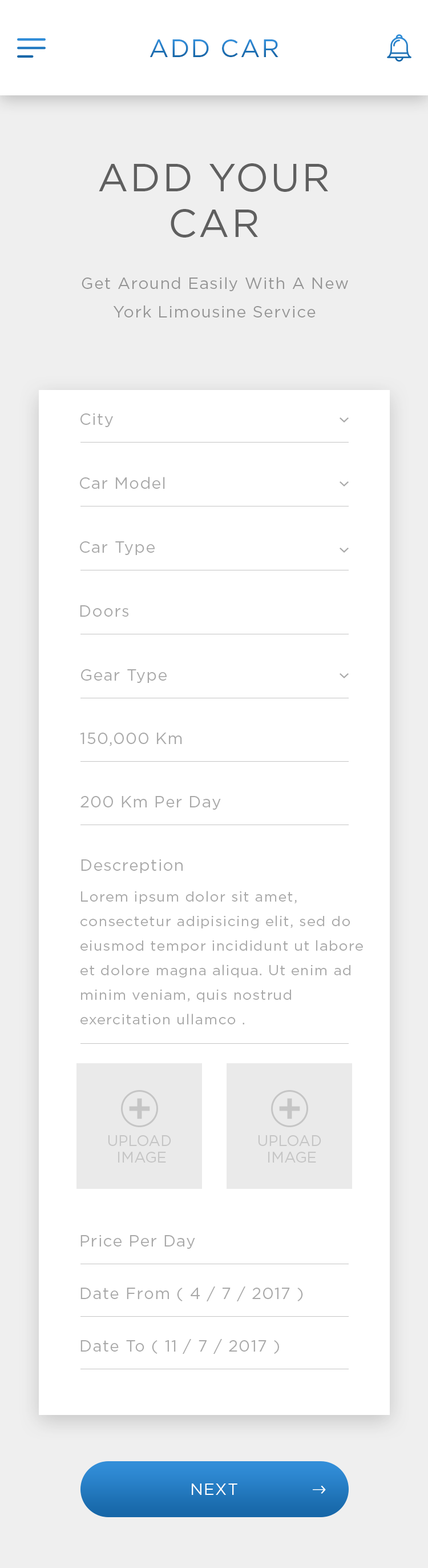
<style>
.page{position:relative;width:428px;height:1568px;background:#ffffff}
.page>*{position:absolute;margin:0}
.t1{font:25.1px "Gotham-Book";letter-spacing:0.05em;text-transform:uppercase}
.t2{font:38.8px/45.7px "Gotham-Book";letter-spacing:0.05em;color:#5f5f5f;text-transform:uppercase}
.t3{font:16px/28.6px "Gotham-Book";letter-spacing:0.05em;color:#959595}
.t4{font:16px "Gotham-Book";letter-spacing:0.05em;color:#a9a9a9}
.t5{font:14.3px/24.6px "Gotham-Book";letter-spacing:0.05em;color:#a9a9a9}
.t6{font:14.8px/16.6px "Gotham-Book";color:#c5c5c5}
.t7{font:16px "Gotham-Book";letter-spacing:0.05em;color:#ffffff;text-transform:uppercase}
</style>
<div class="page">
<p class="t1" style="left:150px;top:39px;width:129px;height:18px">ADD CAR</p>
<p class="t2" style="left:99px;top:163px;width:229px;height:75px;text-align:center">ADD your<br>CAR</p>
<p class="t3" style="left:82px;top:277px;width:266px;height:40px;text-align:center">Get Around Easily With A New York Limousine Service</p>
<p class="t4" style="left:81px;top:413px;width:32px;height:14px">City</p>
<p class="t4" style="left:80px;top:477px;width:85px;height:12px">Car Model</p>
<p class="t4" style="left:80px;top:541px;width:75px;height:14px">Car Type</p>
<p class="t4" style="left:80px;top:605px;width:48px;height:12px">Doors</p>
<p class="t4" style="left:81px;top:669px;width:86px;height:14px">Gear Type</p>
<p class="t4" style="left:80px;top:733px;width:102px;height:13px">150,000 Km</p>
<p class="t4" style="left:81px;top:796px;width:140px;height:14px">200 Km Per Day</p>
<p class="t4" style="left:81px;top:859px;width:102px;height:14px">Descreption</p>
<p class="t5" style="left:81px;top:891px;width:282px;height:133px">Lorem ipsum dolor sit amet,<br>consectetur adipisicing elit, sed do<br>eiusmod tempor incididunt ut labore<br>et dolore magna aliqua. Ut enim ad<br>minim veniam, quis nostrud<br>exercitation ullamco .</p>
<p class="t6" style="left:108px;top:1135px;width:63px;height:28px;text-align:center">UPLOAD<br> IMAGE</p>
<p class="t6" style="left:258px;top:1135px;width:63px;height:28px;text-align:center">UPLOAD<br> IMAGE</p>
<p class="t4" style="left:81px;top:1235px;width:114px;height:14px">Price Per Day</p>
<p class="t4" style="left:81px;top:1286px;width:222px;height:15px">Date From ( 4 / 7 / 2017 )</p>
<p class="t4" style="left:81px;top:1339px;width:198px;height:15px">Date To ( 11 / 7 / 2017 )</p>
<p class="t7" style="left:192px;top:1483px;width:46px;height:12px">next</p>
</div>
